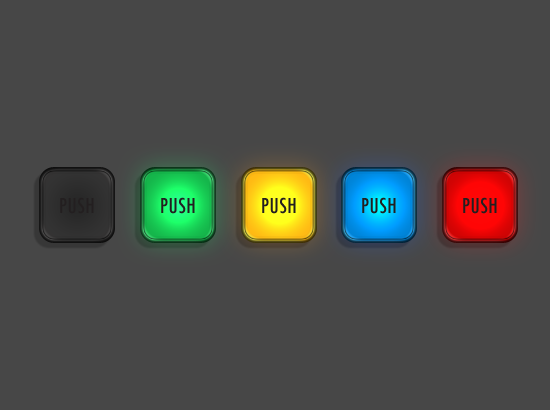
<style>
.page{position:relative;width:550px;height:410px;background:#474747}
.page>*{position:absolute;margin:0}
.t1{font:20px "Futura-CondensedMedium";letter-spacing:0.025em;color:#231f20}
</style>
<div class="page">
<p class="t1" style="left:60px;top:197px;width:34px;height:17px">PUSH</p>
<p class="t1" style="left:161px;top:197px;width:34px;height:17px">PUSH</p>
<p class="t1" style="left:262px;top:197px;width:34px;height:17px">PUSH</p>
<p class="t1" style="left:362px;top:197px;width:34px;height:17px">PUSH</p>
<p class="t1" style="left:463px;top:197px;width:34px;height:17px">PUSH</p>
</div>
